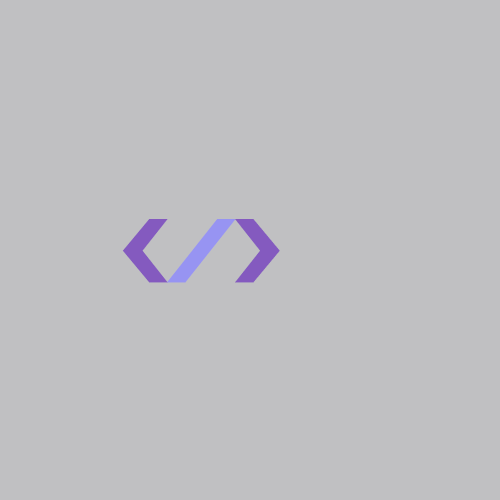
<style>
.page{position:relative;width:500px;height:500px;background:#c0c0c2}
.page>*{position:absolute;margin:0}
.t1{font:100px "SquareOne-Bold";color:#845abf}
.t2{font:100px "SquareOne-Bold";color:#9794f2}
</style>
<div class="page">
<p class="t1" style="left:122px;top:219px;width:158px;height:64px">&lt;<span class="t2">/</span>&gt;</p>
</div>
